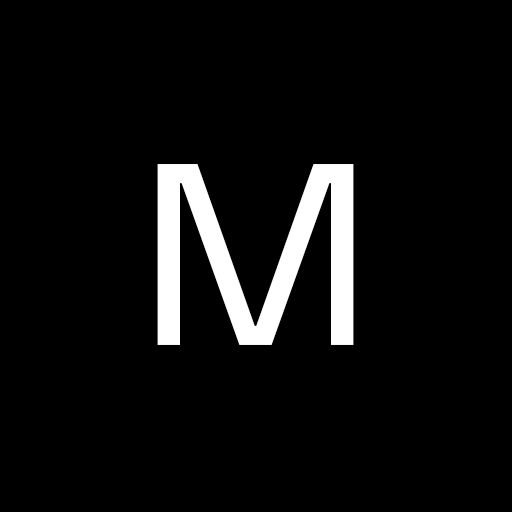
<style>
.page{position:relative;width:512px;height:512px;background:#000000}
.page>*{position:absolute;margin:0}
.t1{font:258.3px "Archia-Regular";color:#ffffff;scale:1.1 1}
</style>
<div class="page">
<p class="t1" style="left:157px;top:164px;width:197px;height:181px">M</p>
</div>
